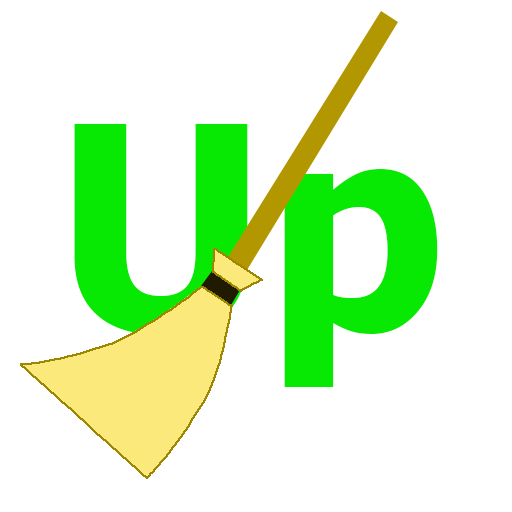
<style>
.page{position:relative;width:512px;height:512px;background:#ffffff}
.page>*{position:absolute;margin:0}
.t1{font:284px "Tahoma-Bold";color:#07e902}
</style>
<div class="page">
<p class="t1" style="left:74px;top:123px;width:364px;height:264px">Up</p>
</div>
